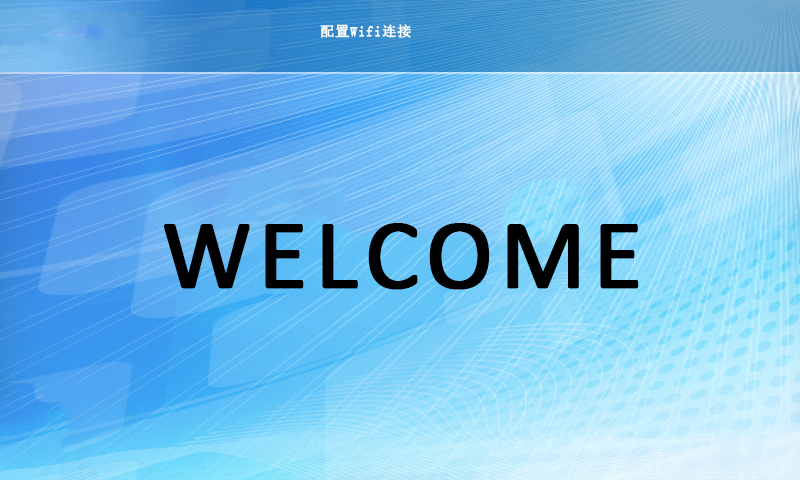
<style>
.page{position:relative;width:800px;height:480px}
.page>*{position:absolute;margin:0}
.t1{font:13.9px "SimSun";letter-spacing:0.05em;color:#ffffff;font-weight:bold}
.t2{font:100px "Calibri";letter-spacing:0.05em;color:#000000;font-weight:bold}
</style>
<div class="page">
<p class="t1" style="left:320px;top:24px;width:91px;height:14px">配置Wifi连接</p>
<p class="t2" style="left:164px;top:223px;width:475px;height:67px">WELCOME</p>
</div>
